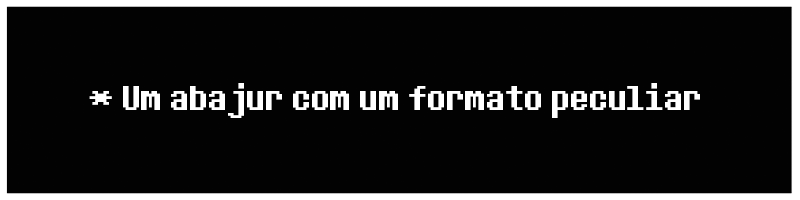
<style>
.page{position:relative;width:800px;height:200px;background:#020202}
.page>*{position:absolute;margin:0}
.t1{font:36px "DeterminationSans";color:#ffffff}
</style>
<div class="page">
<p class="t1" style="left:89px;top:83px;width:611px;height:35px">* Um abajur com um formato peculiar</p>
</div>
